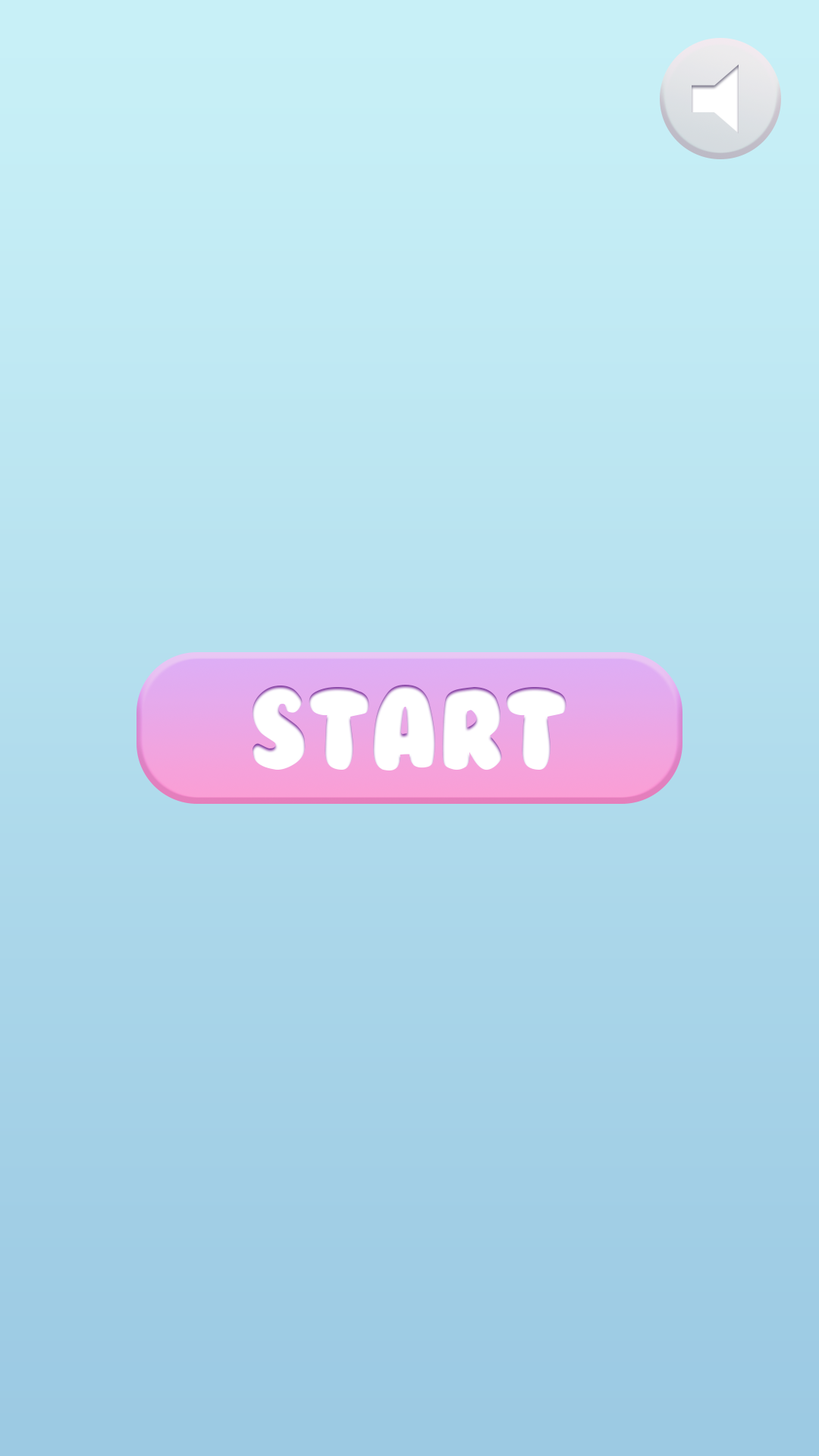
<style>
.page{position:relative;width:819px;height:1456px}
.page>*{position:absolute;margin:0}
.t1{font:106.2px "BubbleGum";color:#ffffff}
</style>
<div class="page">
<p class="t1" style="left:252px;top:685px;width:314px;height:85px">Start</p>
</div>
